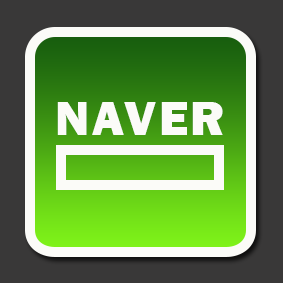
<style>
.page{position:relative;width:283px;height:283px;background:#393838}
.page>*{position:absolute;margin:0}
.t1{font:50px "FranklinGothic-Heavy";letter-spacing:0.05em;color:#fbfbf8}
</style>
<div class="page">
<p class="t1" style="left:57px;top:102px;width:166px;height:33px">NAVER</p>
</div>
